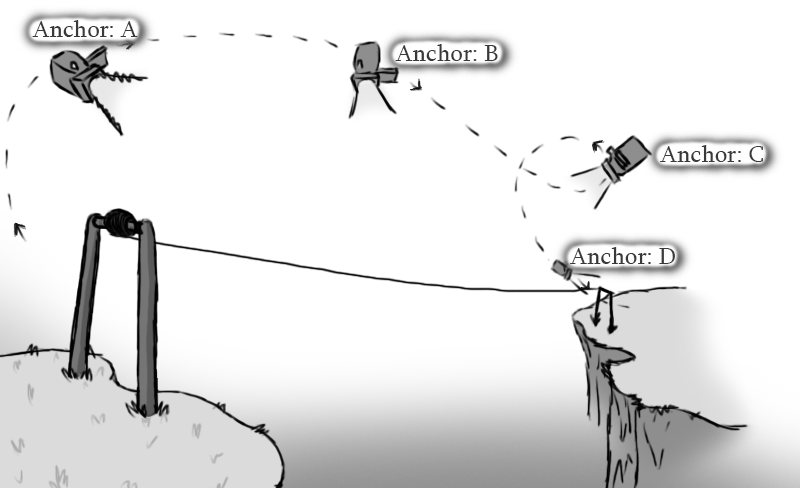
<style>
.page{position:relative;width:800px;height:488px;background:#ffffff}
.page>*{position:absolute;margin:0}
.t1{font:24px "Sylfaen";color:#393939}
</style>
<div class="page">
<p class="t1" style="left:32px;top:20px;width:106px;height:17px">Anchor: A</p>
<p class="t1" style="left:395px;top:44px;width:103px;height:17px">Anchor: B</p>
<p class="t1" style="left:660px;top:145px;width:103px;height:17px">Anchor: C</p>
<p class="t1" style="left:570px;top:247px;width:105px;height:17px">Anchor: D</p>
</div>
